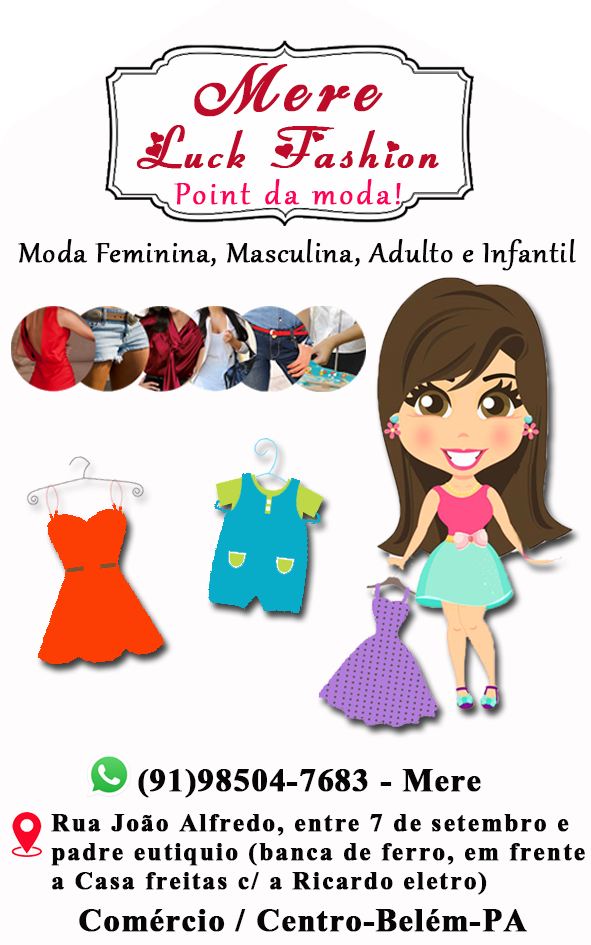
<style>
.page{position:relative;width:591px;height:945px;background:#fefcfc}
.page>*{position:absolute;margin:0}
.t1{font:87.5px "Ballegra";letter-spacing:0.1em;color:#be0b29;font-weight:bold}
.t2{font:57.7px "FiolexGirls-Regular";letter-spacing:0.06em;color:#be0b29;font-weight:bold}
.t3{font:37.5px "Gabriola";letter-spacing:0.08em;color:#fd045c;font-weight:bold}
.t4{font:35.4px "Gabriola";letter-spacing:0.02em;color:#060606;font-weight:bold}
.t5{font:39.6px "Aparajita-Bold";letter-spacing:0.02em;color:#060606;font-weight:bold}
.t6{font:31.2px/29.2px "Aparajita-Bold";letter-spacing:0.045em;color:#060606;font-weight:bold}
</style>
<div class="page">
<p class="t1" style="left:194px;top:63px;width:189px;height:54px">Mere</p>
<p class="t2" style="left:136px;top:125px;width:303px;height:44px">Luck Fashion</p>
<p class="t3" style="left:174px;top:179px;width:227px;height:26px">Point da moda!</p>
<p class="t4" style="left:18px;top:239px;width:558px;height:32px">Moda Feminina, Masculina, Adulto e Infantil</p>
<p class="t5" style="left:138px;top:769px;width:343px;height:29px">(91)98504-7683 - Mere</p>
<p class="t6" style="left:51px;top:814px;width:534px;height:81px">Rua João Alfredo, entre 7 de setembro e<br>padre eutiquio (banca de ferro, em frente <br>a Casa freitas c/ a Ricardo eletro)</p>
<p class="t5" style="left:79px;top:909px;width:448px;height:23px">Comércio / Centro-Belém-PA</p>
</div>
